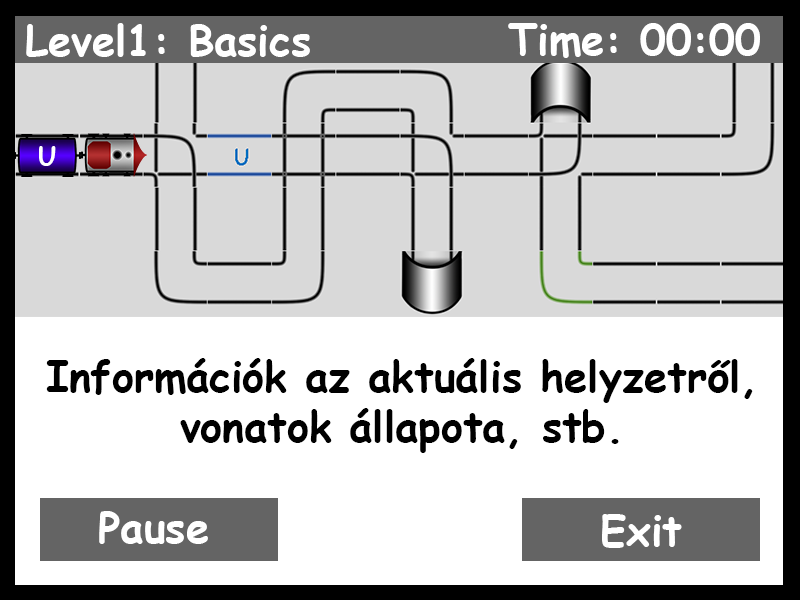
<style>
.page{position:relative;width:800px;height:600px;background:#ffffff}
.page>*{position:absolute;margin:0}
.t1{font:41.7px "ComicSansMS-Bold";color:#ffffff}
.t2{font:25px "ComicSansMS-Bold";color:#ffffff}
.t3{font:41.7px "ComicSansMS-Bold";color:#000000}
</style>
<div class="page">
<p class="t1" style="left:26px;top:23px;width:284px;height:34px">Level1: Basics</p>
<p class="t1" style="left:508px;top:23px;width:252px;height:35px">Time: 00:00</p>
<p class="t2" style="left:39px;top:146px;width:17px;height:20px">U</p>
<p class="t3" style="left:46px;top:358px;width:707px;height:95px;text-align:center">Információk az aktuális helyzetről,<br>vonatok állapota, stb.</p>
<p class="t1" style="left:99px;top:511px;width:109px;height:33px">Pause</p>
<p class="t1" style="left:602px;top:514px;width:80px;height:34px">Exit</p>
</div>
